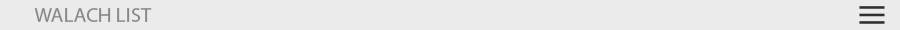
<style>
.page{position:relative;width:900px;height:30px;background:#ebebeb}
.page>*{position:absolute;margin:0}
.t1{font:20.8px "MyriadPro-Regular";color:#878787;text-transform:uppercase}
</style>
<div class="page">
<p class="t1" style="left:34px;top:8px;width:118px;height:14px">walach list</p>
</div>
